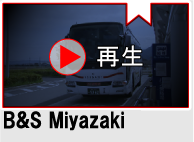
<style>
.page{position:relative;width:194px;height:142px}
.page>*{position:absolute;margin:0}
.t1{font:20.7px "HGSSoeiKakugothicUB";color:#000000}
</style>
<div class="page">
<p class="t1" style="left:4px;top:111px;width:120px;height:20px">B&amp;S Miyazaki</p>
</div>
